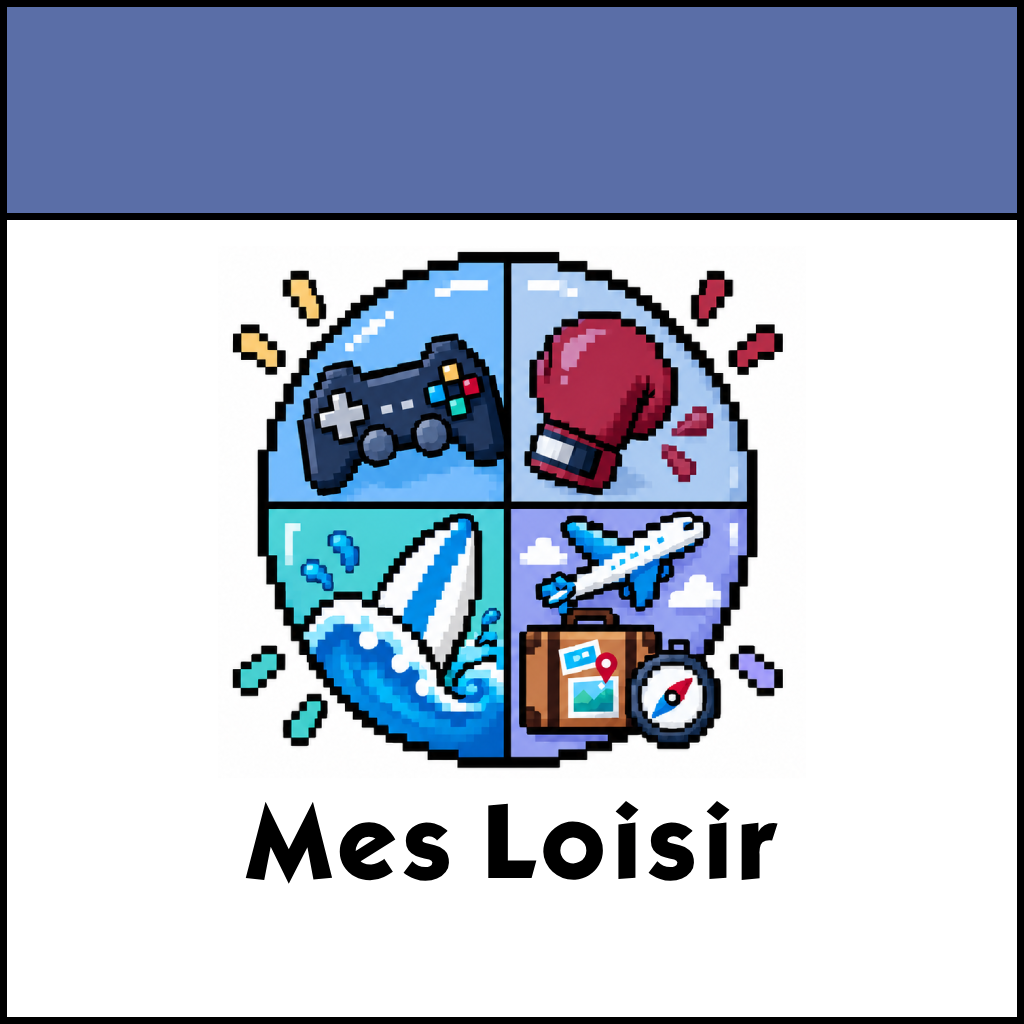
<style>
.page{position:relative;width:1024px;height:1024px;background:#ffffff}
.page>*{position:absolute;margin:0}
.t1{font:90px "KabelBdNormal";color:#000000}
</style>
<div class="page">
<p class="t1" style="left:245px;top:800px;width:533px;height:84px">Mes Loisir</p>
</div>
